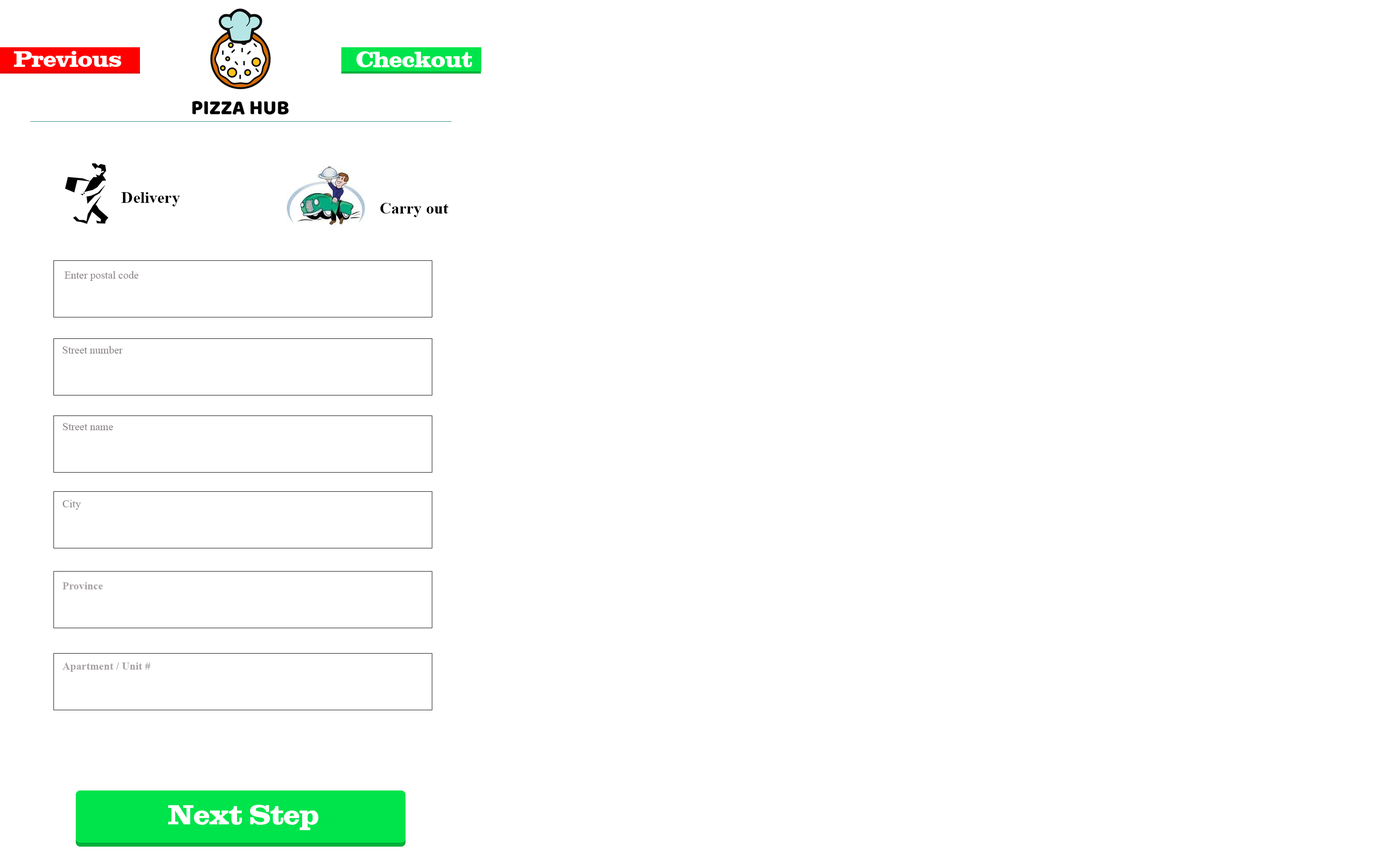
<style>
.page{position:relative;width:1394px;height:856px;background:#ffffff}
.page>*{position:absolute;margin:0}
.t1{font:16px "TimesNewRomanPS-BoldMT";letter-spacing:0.005em;color:#000000}
.t2{font:10.7px "TimesNewRomanPSMT";color:#8b8484}
.t3{font:10.7px "TimesNewRomanPS-BoldMT";letter-spacing:0.005em;color:#a8a2a2}
</style>
<div class="page">
<p class="t1" style="left:121px;top:192px;width:59px;height:14px">Delivery</p>
<p class="t1" style="left:380px;top:203px;width:68px;height:14px">Carry out</p>
<p class="t2" style="left:64px;top:271px;width:75px;height:10px">Enter postal code</p>
<p class="t2" style="left:62px;top:346px;width:61px;height:7px">Street number</p>
<p class="t2" style="left:63px;top:423px;width:50px;height:7px">Street name</p>
<p class="t2" style="left:62px;top:500px;width:19px;height:9px">City</p>
<p class="t3" style="left:62px;top:582px;width:41px;height:7px">Province</p>
<p class="t3" style="left:62px;top:662px;width:88px;height:10px">Apartment / Unit #</p>
</div>
